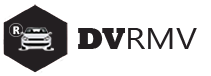
<style>
.page{position:relative;width:211px;height:76px;background:#ffffff}
.page>*{position:absolute;margin:0}
.t1{font:12.1px "Calibri-Bold";color:#ffffff}
.t2{font:30.9px "Rockwell-ExtraBold";color:#231f21}
.t3{font:29px "MyanmarText";color:#231f21;scale:1.17 1}
</style>
<div class="page">
<p class="t1" style="left:13px;top:26px;width:7px;height:9px">R</p>
<p class="t2" style="left:78px;top:28px;width:47px;height:21px">DV</p>
<p class="t3" style="left:128px;top:28px;width:69px;height:21px">RMV</p>
</div>
